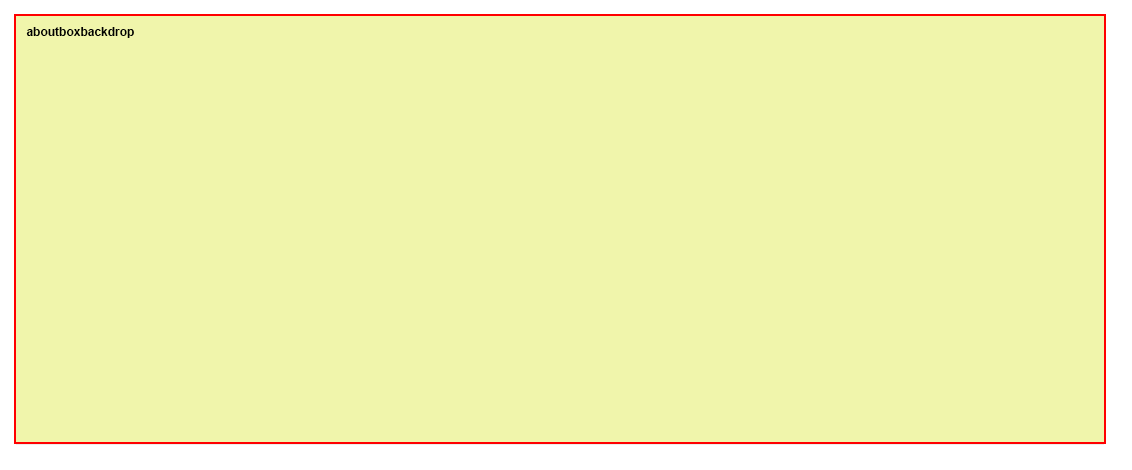
<style>
.page{position:relative;width:1132px;height:470px;background:#f0f5ab}
.page>*{position:absolute;margin:0}
.t1{font:12px "Arial-BoldMT";color:#000000}
</style>
<div class="page">
<p class="t1" style="left:26px;top:27px;width:108px;height:11px">aboutboxbackdrop</p>
</div>
